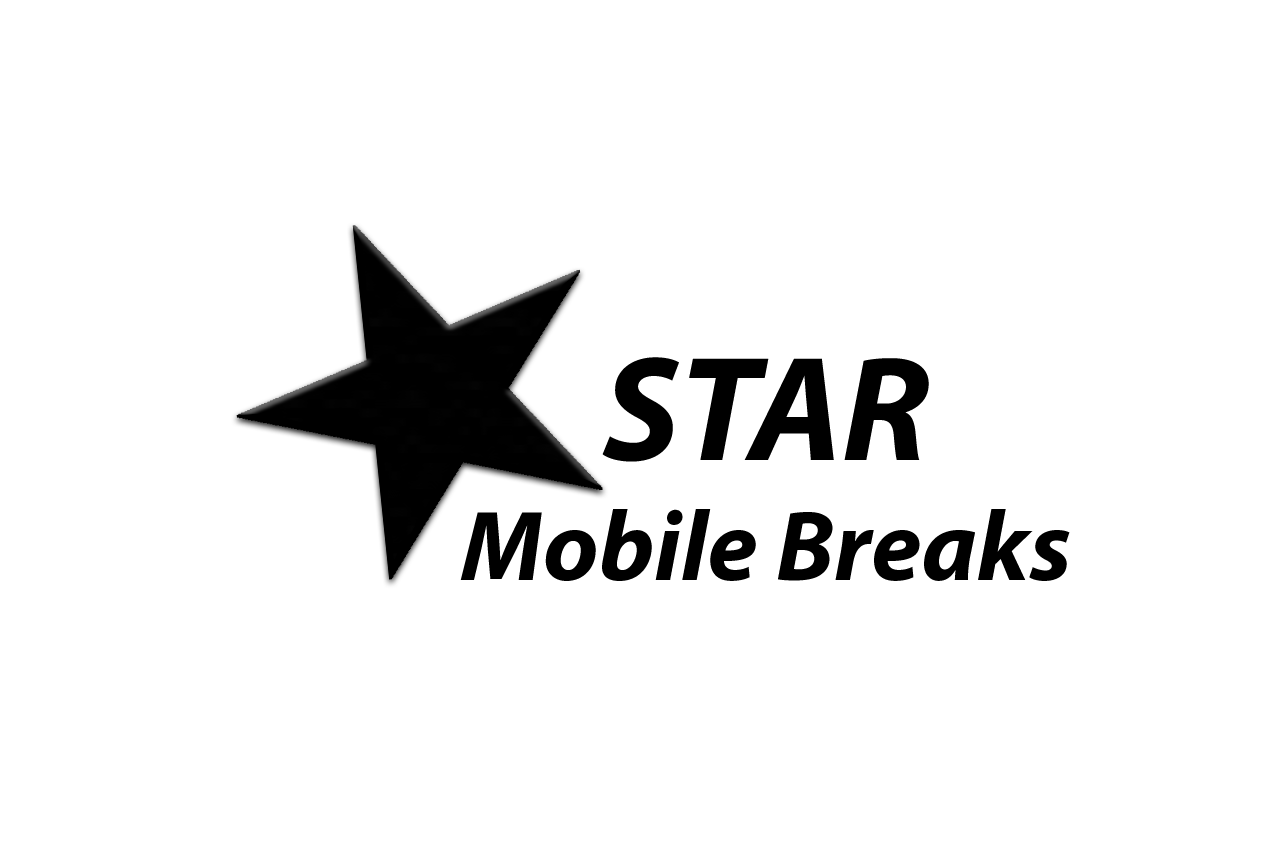
<style>
.page{position:relative;width:1275px;height:851px;background:#ffffff}
.page>*{position:absolute;margin:0}
.t1{font:100px "MyriadPro-BoldIt";color:#000000}
.t2{font:150px "MyriadPro-BoldIt";color:#000000}
</style>
<div class="page">
<p class="t1" style="left:460px;top:357px;width:610px;height:224px;text-align:center"><span class="t2">STAR <br></span>Mobile Breaks</p>
</div>
